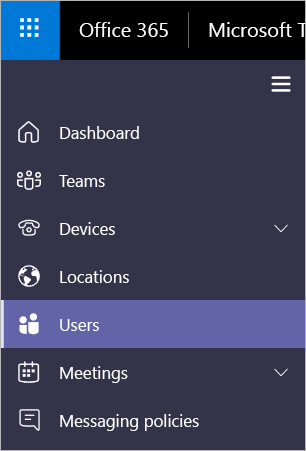
<style>
.page{position:relative;width:306px;height:451px;background:#33344a}
.page>*{position:absolute;margin:0}
.t1{font:20px "SegoeUI";color:#ffffff}
.t2{font:16.8px "SegoeUI";color:#ffffff}
</style>
<div class="page">
<p class="t1" style="left:79px;top:22px;width:89px;height:15px">Office 365</p>
<p class="t1" style="left:209px;top:22px;width:99px;height:15px">Microsoft T</p>
<p class="t2" style="left:60px;top:126px;width:79px;height:13px">Dashboard</p>
<p class="t2" style="left:59px;top:175px;width:46px;height:12px">Teams</p>
<p class="t2" style="left:60px;top:222px;width:55px;height:13px">Devices</p>
<p class="t2" style="left:60px;top:270px;width:69px;height:13px">Locations</p>
<p class="t2" style="left:60px;top:319px;width:39px;height:12px">Users</p>
<p class="t2" style="left:60px;top:366px;width:68px;height:17px">Meetings</p>
<p class="t2" style="left:60px;top:414px;width:139px;height:17px">Messaging policies</p>
</div>
